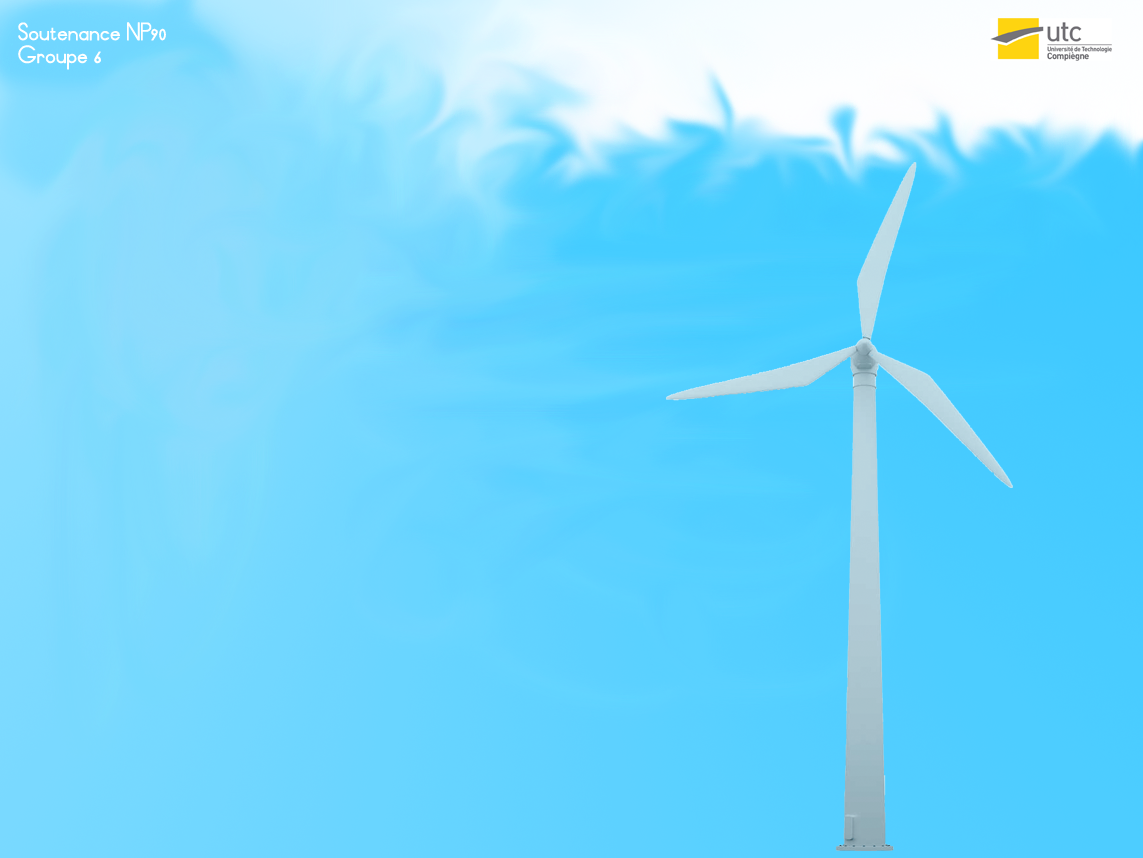
<style>
.page{position:relative;width:1143px;height:858px}
.page>*{position:absolute;margin:0}
.t1{font:19.1px "ThinLinesandCurves";color:#ffffff;font-weight:bold}
</style>
<div class="page">
<p class="t1" style="left:18px;top:22px;width:148px;height:48px">Soutenance NP90<br>Groupe 6</p>
</div>
